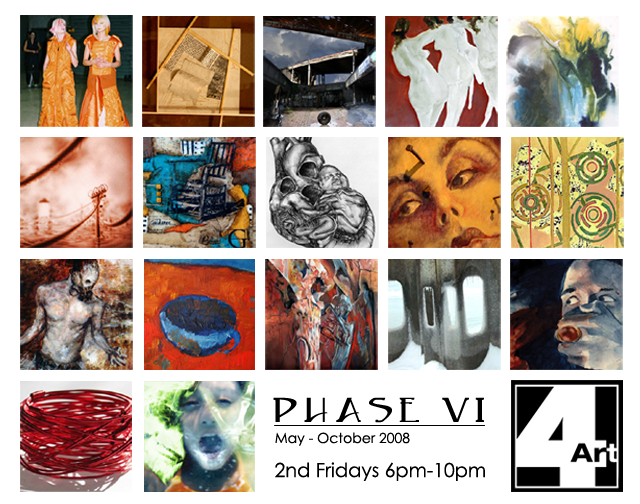
<style>
.page{position:relative;width:640px;height:504px;background:#ffffff}
.page>*{position:absolute;margin:0}
.t1{font:36px "Caeldera";color:#000000}
.t2{font:14px "CenturyGothic";color:#000000}
.t3{font:19.4px "CenturyGothic";color:#000000}
</style>
<div class="page">
<p class="t1" style="left:273px;top:397px;width:211px;height:26px">PHASE VI</p>
<p class="t2" style="left:275px;top:432px;width:135px;height:14px">May - October 2008</p>
<p class="t3" style="left:275px;top:462px;width:210px;height:19px">2nd Fridays 6pm-10pm</p>
</div>
